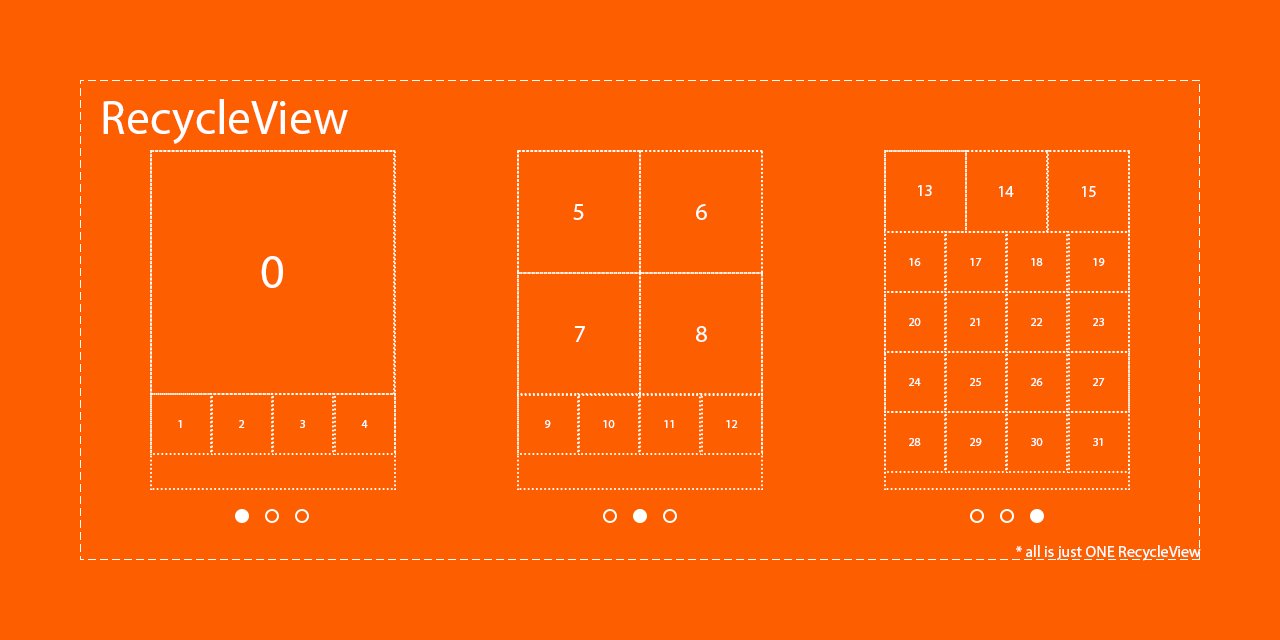
<style>
.page{position:relative;width:1280px;height:640px;background:#fd5f00}
.page>*{position:absolute;margin:0}
.t1{font:48px "MyriadPro-Regular";color:#ffffff}
.t2{font:16px "MyriadPro-Regular";color:#ffffff}
.t3{font:24px "MyriadPro-Regular";color:#ffffff}
.t4{font:12px "MyriadPro-Regular";color:#ffffff}
</style>
<div class="page">
<p class="t1" style="left:103px;top:99px;width:245px;height:45px">RecycleView</p>
<p class="t2" style="left:918px;top:185px;width:14px;height:11px">13</p>
<p class="t2" style="left:999px;top:186px;width:15px;height:11px">14</p>
<p class="t2" style="left:1082px;top:186px;width:14px;height:11px">15</p>
<p class="t3" style="left:573px;top:204px;width:11px;height:16px">5</p>
<p class="t3" style="left:696px;top:204px;width:11px;height:16px">6</p>
<p class="t1" style="left:261px;top:256px;width:22px;height:32px">0</p>
<p class="t4" style="left:909px;top:258px;width:12px;height:8px">16</p>
<p class="t4" style="left:970px;top:258px;width:12px;height:8px">17</p>
<p class="t4" style="left:1031px;top:258px;width:12px;height:8px">18</p>
<p class="t4" style="left:1093px;top:258px;width:12px;height:8px">19</p>
<p class="t4" style="left:909px;top:318px;width:12px;height:8px">20</p>
<p class="t4" style="left:970px;top:318px;width:10px;height:8px">21</p>
<p class="t4" style="left:1031px;top:318px;width:12px;height:8px">22</p>
<p class="t4" style="left:1093px;top:318px;width:11px;height:8px">23</p>
<p class="t3" style="left:574px;top:326px;width:11px;height:16px">7</p>
<p class="t3" style="left:696px;top:326px;width:11px;height:16px">8</p>
<p class="t4" style="left:909px;top:378px;width:12px;height:8px">24</p>
<p class="t4" style="left:970px;top:378px;width:11px;height:8px">25</p>
<p class="t4" style="left:1031px;top:378px;width:12px;height:8px">26</p>
<p class="t4" style="left:1093px;top:378px;width:12px;height:8px">27</p>
<p class="t4" style="left:178px;top:420px;width:4px;height:8px">1</p>
<p class="t4" style="left:239px;top:420px;width:6px;height:8px">2</p>
<p class="t4" style="left:300px;top:420px;width:5px;height:8px">3</p>
<p class="t4" style="left:361px;top:420px;width:7px;height:8px">4</p>
<p class="t4" style="left:545px;top:420px;width:6px;height:8px">9</p>
<p class="t4" style="left:603px;top:420px;width:12px;height:8px">10</p>
<p class="t4" style="left:664px;top:420px;width:10px;height:8px">11</p>
<p class="t4" style="left:726px;top:420px;width:12px;height:8px">12</p>
<p class="t4" style="left:909px;top:438px;width:12px;height:8px">28</p>
<p class="t4" style="left:970px;top:438px;width:12px;height:8px">29</p>
<p class="t4" style="left:1031px;top:438px;width:12px;height:8px">30</p>
<p class="t4" style="left:1093px;top:438px;width:10px;height:8px">31</p>
<p class="t2" style="left:1016px;top:545px;width:185px;height:16px">* all is just ONE RecycleView</p>
</div>
